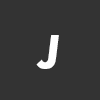
<style>
.page{position:relative;width:100px;height:100px;background:#333333}
.page>*{position:absolute;margin:0}
.t1{font:50px "FuturaPT-HeavyObl";color:#ffffff}
</style>
<div class="page">
<p class="t1" style="left:36px;top:35px;width:23px;height:34px">J</p>
</div>
